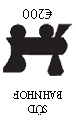
<style>
.page{position:relative;width:76px;height:124px;background:#ffffff}
.page>*{position:absolute;margin:0}
.t1{font:14px "MyriadPro-Regular";color:#000000}
.t2{font:12px "AdobeDevanagari-Regular";color:#000000;scale:0.9 1}
</style>
<div class="page">
<p class="t1" style="left:23px;top:9px;width:29px;height:10px;rotate:180deg">€200</p>
<p class="t2" style="left:13px;top:91px;width:49px;height:24px;text-align:center;rotate:180deg">SÜD<br>BAHNHOF</p>
</div>
